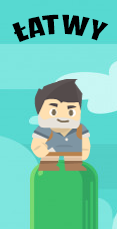
<style>
.page{position:relative;width:117px;height:229px}
.page>*{position:absolute;margin:0}
.t1{font:24px "Impact";color:#000000}
</style>
<div class="page">
<p class="t1" style="left:12px;top:14px;width:97px;height:29px">ŁATWY</p>
</div>
